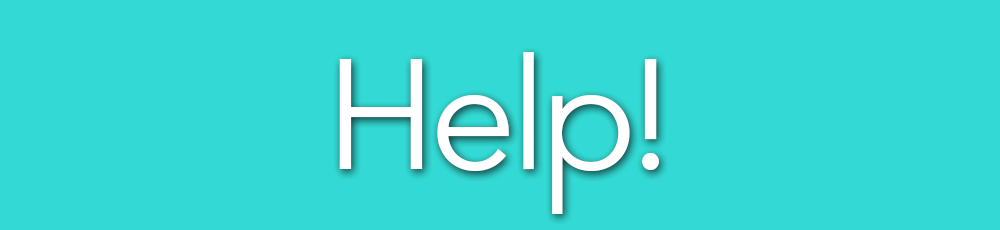
<style>
.page{position:relative;width:1000px;height:230px;background:#33dad5}
.page>*{position:absolute;margin:0}
.t1{font:154.5px "Avenir-Book";letter-spacing:-0.04em;color:#ffffff}
</style>
<div class="page">
<p class="t1" style="left:339px;top:52px;width:320px;height:162px">Help!</p>
</div>
